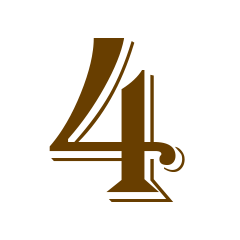
<style>
.page{position:relative;width:240px;height:240px;background:#ffffff}
.page>*{position:absolute;margin:0}
.t1{font:250px "Algerian";color:#683e00}
</style>
<div class="page">
<p class="t1" style="left:49px;top:38px;width:136px;height:164px">4</p>
</div>
